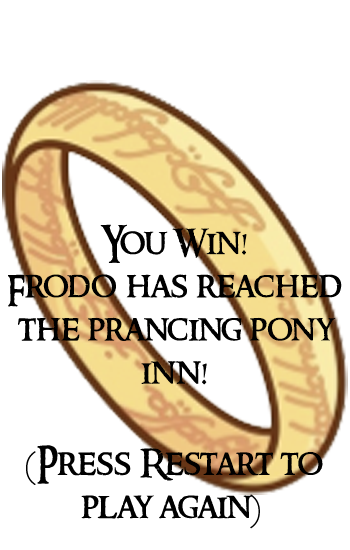
<style>
.page{position:relative;width:350px;height:550px;background:#ffffff}
.page>*{position:absolute;margin:0}
.t1{font:36px "RingbearerMedium";color:#000000}
</style>
<div class="page">
<p class="t1" style="left:8px;top:224px;width:334px;height:161px;text-align:center">You Win!<br>Frodo has reached<br>the prancing pony<br>inn!</p>
<p class="t1" style="left:26px;top:445px;width:297px;height:84px;text-align:center">(Press Restart to<br>play again)</p>
</div>
